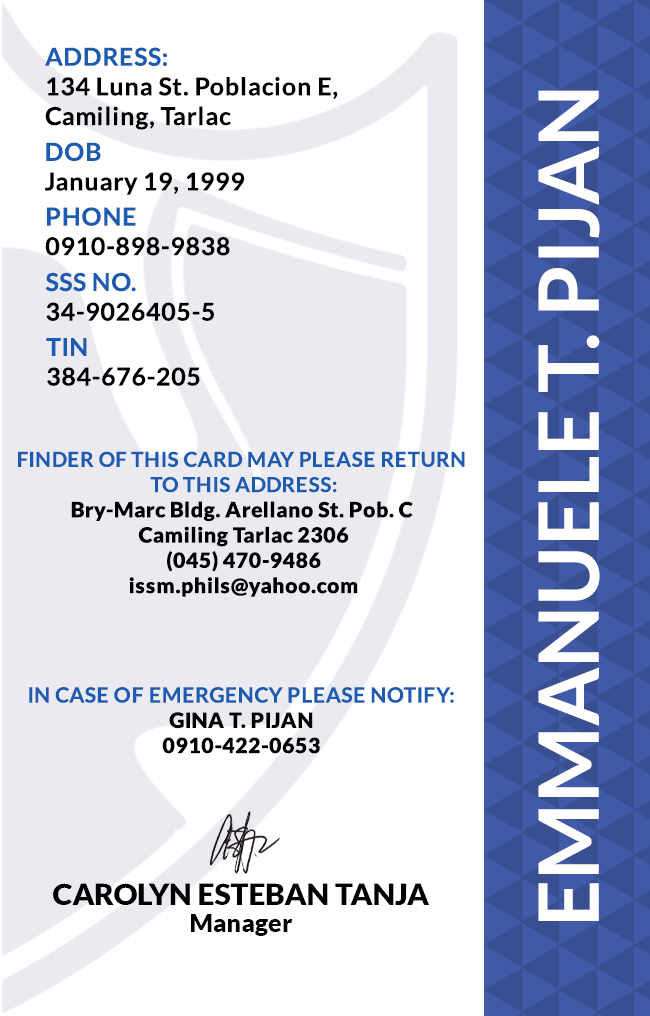
<style>
.page{position:relative;width:650px;height:1016px;background:#ffffff}
.page>*{position:absolute;margin:0}
.t1{font:24.7px/29.6px "Lato-Bold";letter-spacing:0.025em;color:#000000}
.t2{font:24.7px/29.6px "Lato-Bold";letter-spacing:0.025em;color:#1c5bb0}
.t3{font:83.3px "Lato-Bold";color:#ffffff}
.t4{font:21.1px "Lato-Black";letter-spacing:0.025em}
.t5{font:20.5px/25.3px "Lato-Bold";letter-spacing:0.025em;text-transform:uppercase}
.t6{font:21.1px/25.3px "Lato-Bold";letter-spacing:0.025em;color:#1c5bb0}
.t7{font:21.1px "Lato-Black";letter-spacing:0.025em;color:#000000}
.t8{font:29.5px "Lato-Black";color:#000000}
.t9{font:25px "Lato-Black";color:#000000}
</style>
<div class="page">
<p class="t1" style="left:45px;top:47px;width:293px;height:83px"><span class="t2">ADDRESS:<br></span>134 Luna St. Poblacion E,<br>Camiling, Tarlac</p>
<p class="t3" style="left:538px;top:90px;width:62px;height:831px;rotate:-90deg">EMMANUELE T. PIJAN</p>
<p class="t1" style="left:45px;top:142px;width:200px;height:53px"><span class="t2">DOB<br></span>January 19, 1999</p>
<p class="t1" style="left:45px;top:207px;width:185px;height:49px"><span class="t2">PHONE <br></span>0910-898-9838</p>
<p class="t1" style="left:45px;top:272px;width:169px;height:49px"><span class="t2">SSS NO.<br></span>34-9026405-5</p>
<p class="t1" style="left:46px;top:338px;width:154px;height:48px"><span class="t2">TIN<br></span>384-676-205</p>
<p class="t4" style="left:18px;top:451px;width:447px;height:146px;text-align:center"><span class="t5">Finder of this card may please return <br>to this address:<br></span>Bry-Marc Bldg. Arellano St. Pob. C <br>Camiling Tarlac 2306<br>(045) 470-9486<br>issm.phils@yahoo.com</p>
<p class="t6" style="left:29px;top:687px;width:425px;height:67px;text-align:center">IN CASE OF EMERGENCY PLEASE NOTIFY:<br><span class="t7">GINA T. PIJAN<br>0910-422-0653</span></p>
<p class="t8" style="left:53px;top:883px;width:376px;height:22px">CAROLYN ESTEBAN TANJA</p>
<p class="t9" style="left:191px;top:914px;width:102px;height:22px">Manager</p>
</div>
